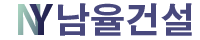
<style>
.page{position:relative;width:200px;height:40px;background:#ffffff}
.page>*{position:absolute;margin:0}
.t1{font:35px "AdobeGothicStd-Bold";color:#48487d}
</style>
<div class="page">
<p class="t1" style="left:58px;top:3px;width:134px;height:33px">남율건설</p>
</div>
